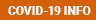
<style>
.page{position:relative;width:96px;height:20px;background:#d46107}
.page>*{position:absolute;margin:0}
.t1{font:12px "Roboto-Black";color:#ffffff}
</style>
<div class="page">
<p class="t1" style="left:8px;top:6px;width:83px;height:9px">COVID-19 INFO</p>
</div>
